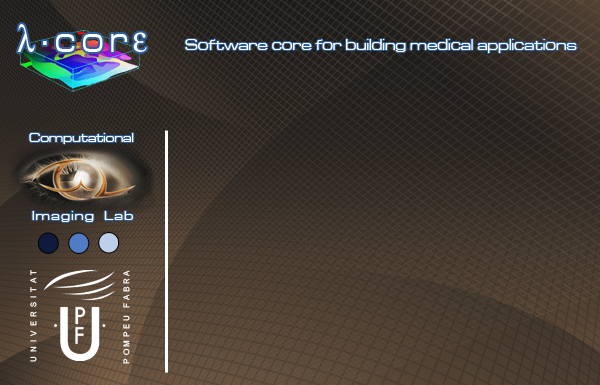
<style>
.page{position:relative;width:600px;height:385px}
.page>*{position:absolute;margin:0}
.t1{font:38.4px "MicrogrammaD-MediExte";letter-spacing:0.2em;color:#ffffff;scale:0.83 1}
.t2{font:38.4px "Symbol";letter-spacing:0.2em;color:#ffffff;scale:0.83 1}
.t3{font:16px "MicrogrammaD-MediExte";color:#ffffff}
.t4{font:13.3px "MicrogrammaD-MediExte";color:#ffffff}
.t5{font:13.3px "MicrogrammaD-MediExte";letter-spacing:0.1em;color:#ffffff}
</style>
<div class="page">
<p class="t1" style="left:17px;top:24px;width:130px;height:28px"><span class="t2">l</span>·cor<span class="t2">e</span></p>
<p class="t3" style="left:185px;top:39px;width:392px;height:14px">Software core for building medical applications</p>
<p class="t4" style="left:29px;top:133px;width:105px;height:11px">Computational</p>
<p class="t5" style="left:32px;top:211px;width:101px;height:11px">Imaging  Lab</p>
</div>
